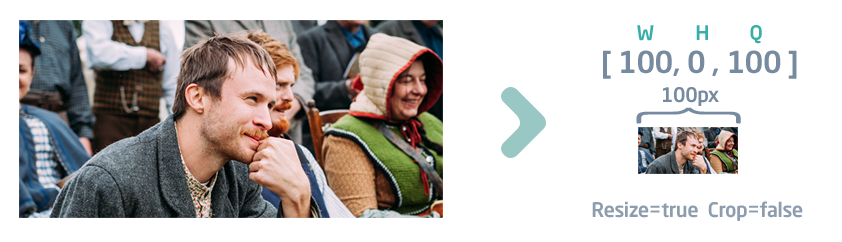
<style>
.page{position:relative;width:842px;height:242px;background:#ffffff}
.page>*{position:absolute;margin:0}
.t1{font:20px "NeoSansPro-Medium";letter-spacing:-0.02em;color:#37afa6;text-transform:uppercase}
.t2{font:30px "NeoSansPro-Medium";letter-spacing:-0.02em;color:#778ba0}
.t3{font:20px "NeoSansPro-Medium";letter-spacing:-0.02em;color:#778ba0}
.t4{font:111px "NeoSansPro-Light";letter-spacing:-0.02em;color:#778ba0;scale:0.56 1}
.t5{font:20px "NeoSansPro-Medium";letter-spacing:-0.02em;color:#8d9dae}
</style>
<div class="page">
<p class="t1" style="left:637px;top:25px;width:125px;height:19px">w       h   q</p>
<p class="t2" style="left:603px;top:50px;width:194px;height:29px">[ 100, 0 , 100 ]</p>
<p class="t3" style="left:663px;top:87px;width:56px;height:19px">100px</p>
<p class="t4" style="left:636px;top:107px;width:105px;height:17px;rotate:90deg">{</p>
<p class="t5" style="left:592px;top:201px;width:211px;height:20px">Resize=true  Crop=false</p>
</div>
